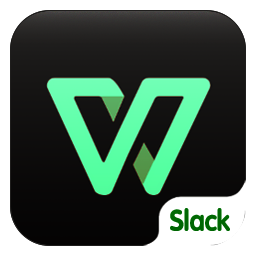
<style>
.page{position:relative;width:256px;height:256px;background:#ffffff}
.page>*{position:absolute;margin:0}
.t1{font:30px "FZY4K--GBK1-0";letter-spacing:-0.01em;color:#006703;scale:0.9 1}
</style>
<div class="page">
<p class="t1" style="left:170px;top:208px;width:60px;height:23px">Slack</p>
</div>
